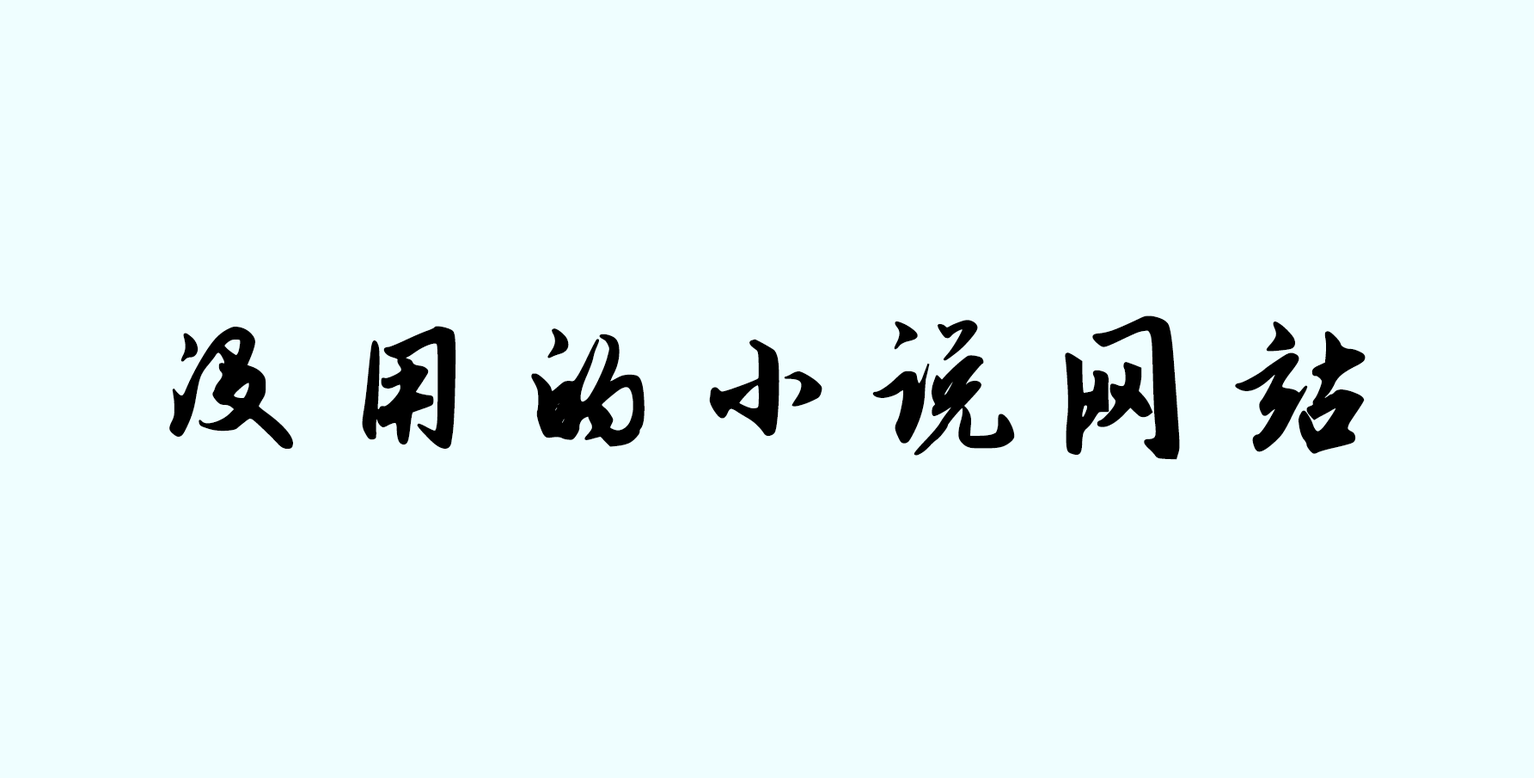
<style>
.page{position:relative;width:1534px;height:778px;background:#effeff}
.page>*{position:absolute;margin:0}
.t1{font:173.6px "zhimang-xing";color:#000000;font-weight:bold}
</style>
<div class="page">
<p class="t1" style="left:169px;top:315px;width:1196px;height:145px">没用的小说网站</p>
</div>
